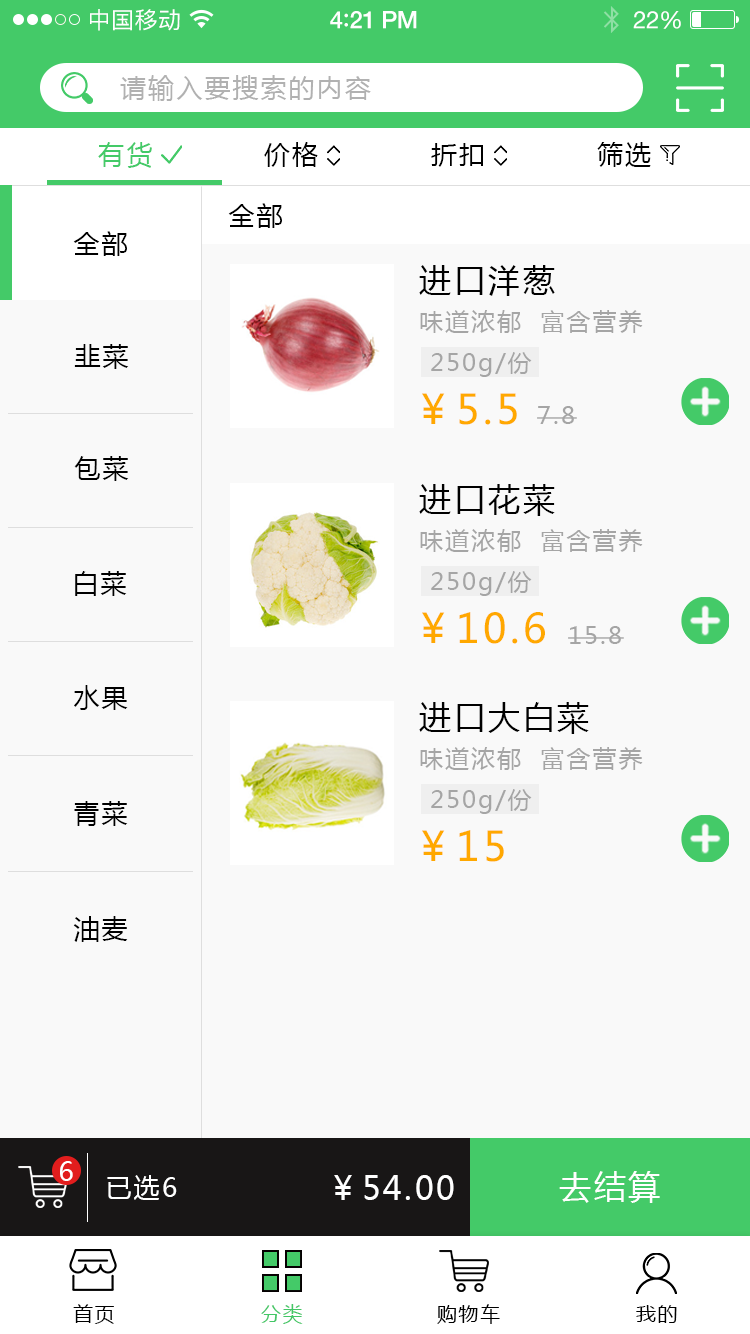
<style>
.page{position:relative;width:750px;height:1334px;background:#f9f9f9}
.page>*{position:absolute;margin:0}
.t1{font:23px "PingFangSC-Regular";letter-spacing:0.02em;color:#ffffff}
.t2{font:24px "HelveticaNeue-Medium";letter-spacing:-0.02em;color:#ffffff}
.t3{font:26px "Avenir-Medium";letter-spacing:-0.02em;color:#ffffff}
.t4{font:24px "HelveticaNeue";letter-spacing:-0.02em;color:#ffffff}
.t5{font:26px "MicrosoftYaHei";letter-spacing:0.08em;color:#b1b1b1;text-transform:uppercase}
.t6{font:26px "MicrosoftYaHei";letter-spacing:0.08em;color:#44ca68;text-transform:uppercase}
.t7{font:26px "MicrosoftYaHei";letter-spacing:0.08em;color:#000000;text-transform:uppercase}
.t8{font:32px "MicrosoftYaHei";letter-spacing:0.08em;color:#000000;text-transform:uppercase}
.t9{font:24px "MicrosoftYaHei";letter-spacing:0.08em;color:#a5a5a5;text-transform:uppercase}
.t10{font:24px "MicrosoftYaHei";letter-spacing:0.08em;color:#a5a5a5}
.t11{font:40.4px "MicrosoftYaHei";letter-spacing:0.08em;color:#ffa800;text-transform:uppercase}
.t12{font:26px "MicrosoftYaHei";letter-spacing:0.08em;color:#ffffff;text-transform:uppercase}
.t13{font:32px "MicrosoftYaHei";letter-spacing:0.08em;color:#ffffff;text-transform:uppercase}
.t14{font:20px "MicrosoftYaHei";letter-spacing:0.08em;color:#000000;text-transform:uppercase}
.t15{font:20px "MicrosoftYaHei";letter-spacing:0.08em;color:#43c766;text-transform:uppercase}
</style>
<div class="page">
<p class="t1" style="left:90px;top:9px;width:90px;height:22px">中国移动</p>
<p class="t2" style="left:330px;top:11px;width:87px;height:18px">4<span class="t3">:</span>21 PM</p>
<p class="t4" style="left:633px;top:11px;width:48px;height:18px">22%</p>
<p class="t5" style="left:120px;top:75px;width:251px;height:26px">请输入要搜索的内容</p>
<p class="t6" style="left:98px;top:142px;width:54px;height:26px">有货</p>
<p class="t7" style="left:264px;top:142px;width:54px;height:25px">价格</p>
<p class="t7" style="left:431px;top:143px;width:52px;height:24px">折扣</p>
<p class="t7" style="left:597px;top:142px;width:54px;height:25px">筛选</p>
<p class="t7" style="left:228px;top:203px;width:54px;height:25px">全部</p>
<p class="t7" style="left:73px;top:231px;width:54px;height:25px">全部</p>
<p class="t8" style="left:419px;top:265px;width:136px;height:31px">进口洋葱</p>
<p class="t9" style="left:420px;top:310px;width:223px;height:23px">味道浓郁  富含营养</p>
<p class="t7" style="left:74px;top:344px;width:55px;height:25px">韭菜</p>
<p class="t10" style="left:431px;top:352px;width:101px;height:25px">250g/份</p>
<p class="t11" style="left:422px;top:393px;width:95px;height:32px">￥5.5</p>
<p class="t10" style="left:537px;top:406px;width:40px;height:18px">7.8</p>
<p class="t7" style="left:74px;top:456px;width:55px;height:25px">包菜</p>
<p class="t8" style="left:419px;top:484px;width:136px;height:32px">进口花菜</p>
<p class="t9" style="left:420px;top:529px;width:223px;height:23px">味道浓郁  富含营养</p>
<p class="t7" style="left:75px;top:571px;width:52px;height:25px">白菜</p>
<p class="t10" style="left:431px;top:571px;width:101px;height:25px">250g/份</p>
<p class="t11" style="left:422px;top:612px;width:123px;height:32px">￥10.6</p>
<p class="t10" style="left:568px;top:626px;width:56px;height:18px">15.8</p>
<p class="t7" style="left:74px;top:685px;width:54px;height:25px">水果</p>
<p class="t8" style="left:419px;top:702px;width:170px;height:32px">进口大白菜</p>
<p class="t9" style="left:420px;top:747px;width:223px;height:23px">味道浓郁  富含营养</p>
<p class="t10" style="left:431px;top:789px;width:101px;height:25px">250g/份</p>
<p class="t7" style="left:74px;top:801px;width:54px;height:25px">青菜</p>
<p class="t11" style="left:422px;top:830px;width:82px;height:32px">￥15</p>
<p class="t7" style="left:73px;top:916px;width:55px;height:26px">油麦</p>
<p class="t12" style="left:60px;top:1161px;width:13px;height:20px">6</p>
<p class="t12" style="left:107px;top:1175px;width:70px;height:25px">已选6</p>
<p class="t13" style="left:334px;top:1175px;width:120px;height:25px">￥54.00</p>
<p class="t13" style="left:559px;top:1171px;width:101px;height:32px">去结算</p>
<p class="t14" style="left:73px;top:1304px;width:41px;height:20px">首页</p>
<p class="t15" style="left:261px;top:1304px;width:42px;height:20px">分类</p>
<p class="t14" style="left:437px;top:1304px;width:63px;height:20px">购物车</p>
<p class="t14" style="left:636px;top:1305px;width:41px;height:18px">我的</p>
</div>
